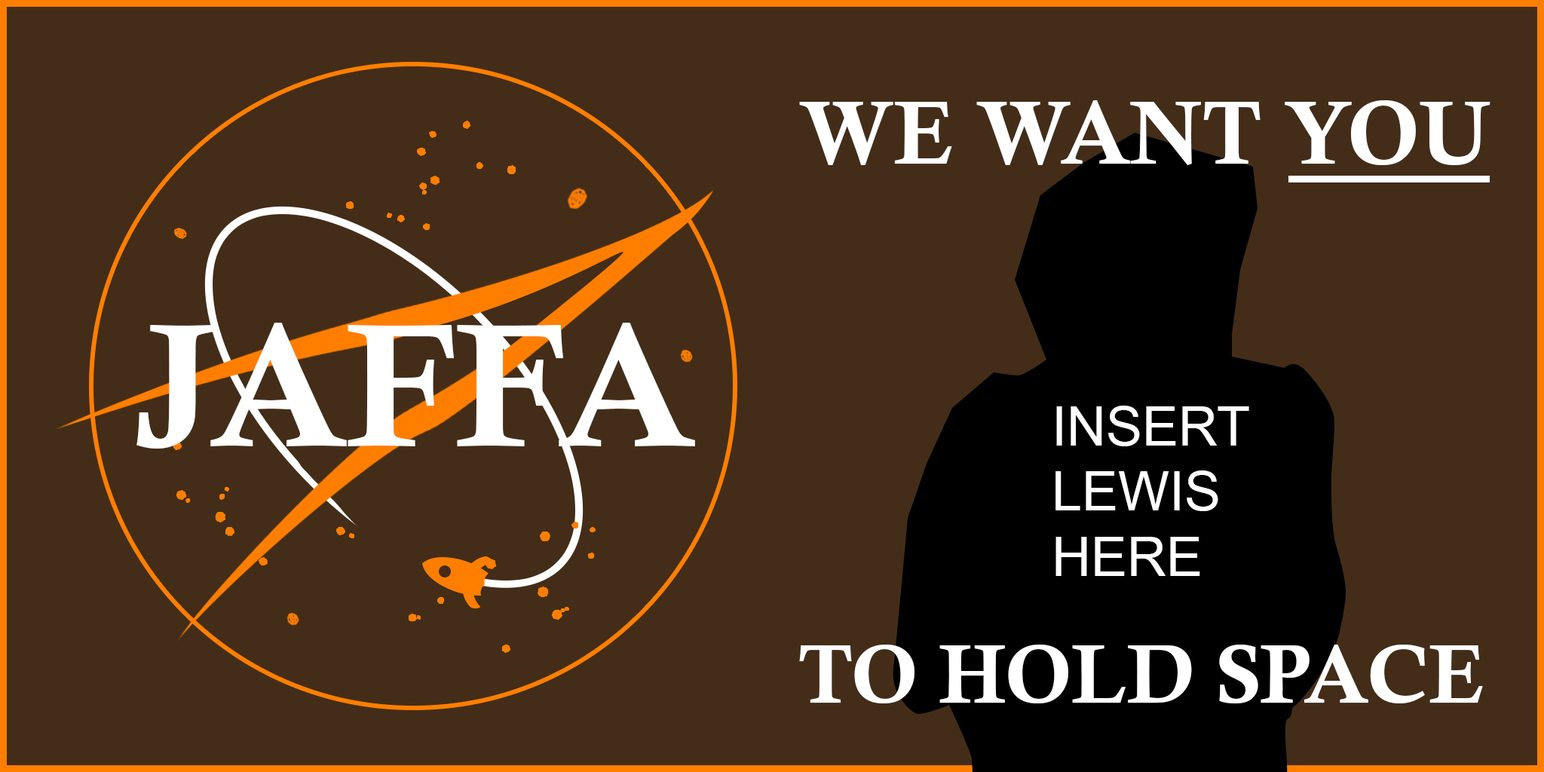
<style>
.page{position:relative;width:1544px;height:772px;background:#432d18}
.page>*{position:absolute;margin:0}
.t1{font:89.2px "CalisMTBol";color:#ffffff;text-transform:uppercase}
.t2{font:175.2px "CalisMTBol";color:#ffffff;text-transform:uppercase}
.t3{font:54.3px "ArialMT";color:#ffffff;text-transform:uppercase}
.t4{font:82.3px "CalisMTBol";color:#ffffff;text-transform:uppercase}
</style>
<div class="page">
<p class="t1" style="left:799px;top:100px;width:692px;height:65px">We want you</p>
<p class="t2" style="left:136px;top:323px;width:559px;height:126px">JAFFA</p>
<p class="t3" style="left:1056px;top:406px;width:193px;height:170px">INSERT<br>LEWIS <br>HERE</p>
<p class="t4" style="left:799px;top:645px;width:684px;height:59px">to hold space</p>
</div>
